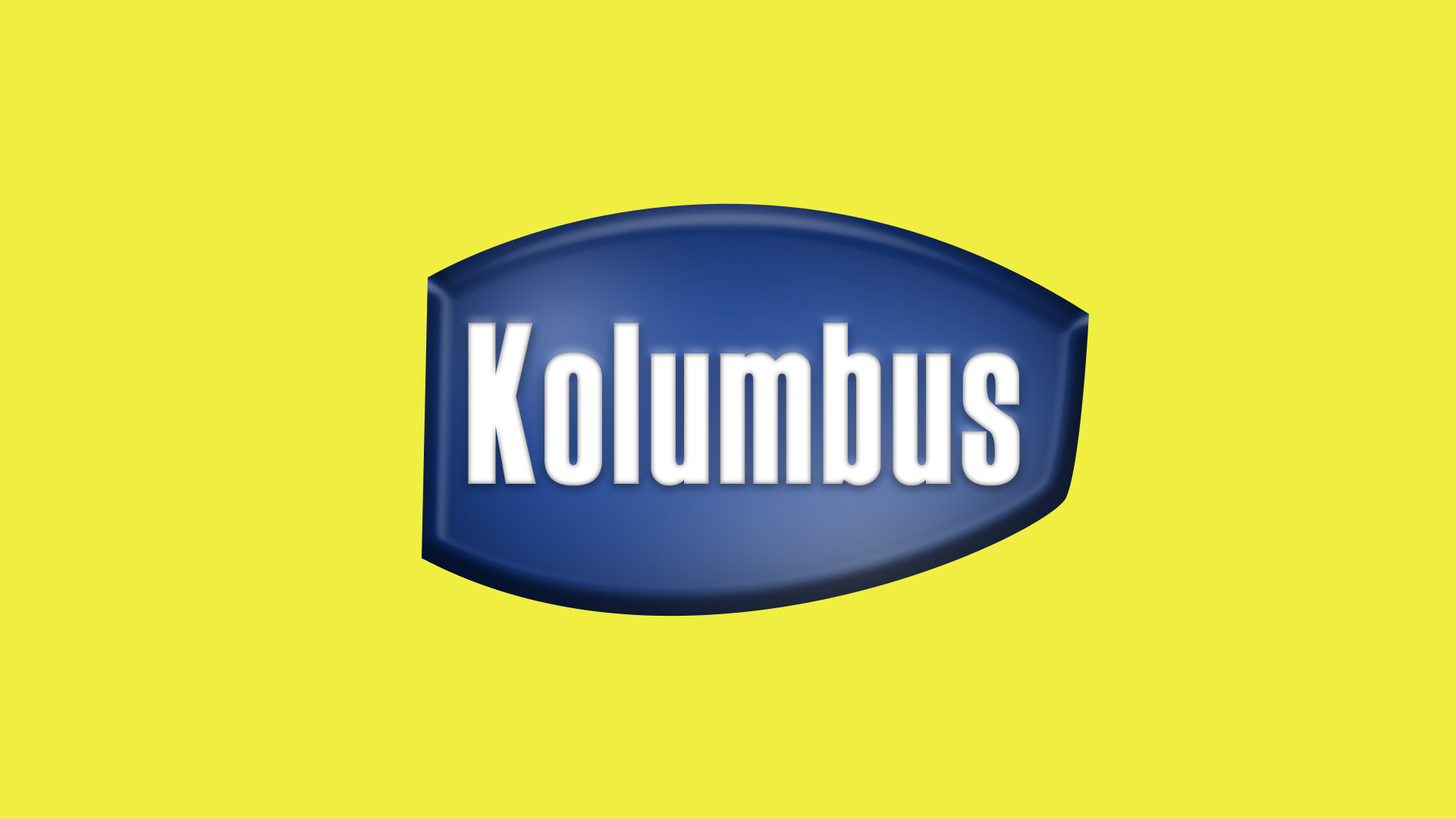
<style>
.page{position:relative;width:1456px;height:819px;background:#f0ee40}
.page>*{position:absolute;margin:0}
.t1{font:230px "Haettenschweiler";letter-spacing:0.05em;color:#ffffff;scale:0.77 1}
</style>
<div class="page">
<p class="t1" style="left:468px;top:322px;width:552px;height:164px">Kolumbus</p>
</div>
